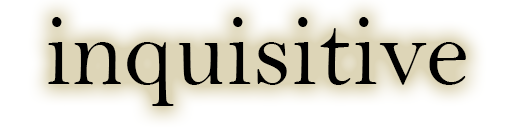
<style>
.page{position:relative;width:512px;height:128px;background:#ffffff}
.page>*{position:absolute;margin:0}
.t1{font:100px "BellMT";color:#000000}
</style>
<div class="page">
<p class="t1" style="left:48px;top:17px;width:418px;height:89px">inquisitive</p>
</div>
